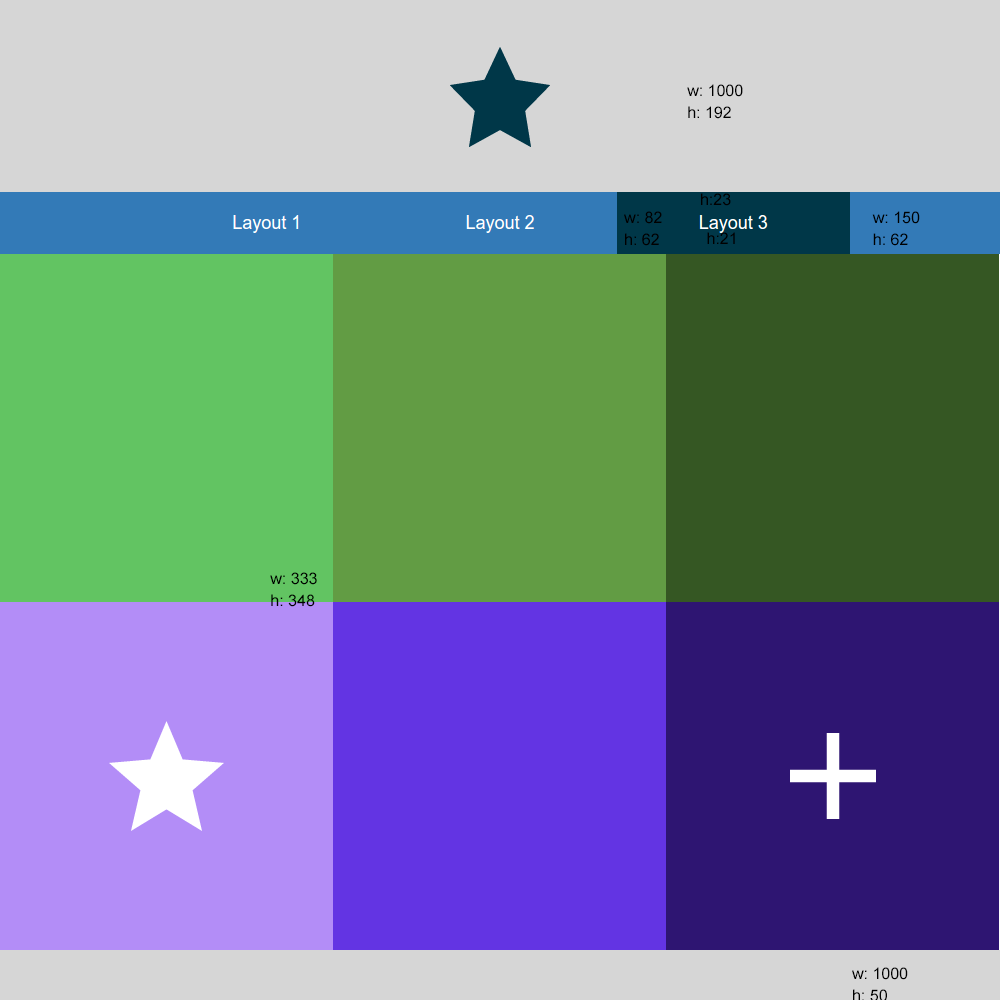
<style>
.page{position:relative;width:1000px;height:1000px;background:#d6d6d6}
.page>*{position:absolute;margin:0}
.t1{font:16px/22px "ArialMT";color:#000000}
.t2{font:16px "ArialMT";color:#000000}
</style>
<div class="page">
<p class="t1" style="left:687px;top:84px;width:56px;height:35px">w: 1000<br>h: 192</p>
<p class="t2" style="left:701px;top:193px;width:30px;height:13px">h:23</p>
<p class="t1" style="left:624px;top:211px;width:38px;height:35px">w: 82<br>h: 62</p>
<p class="t1" style="left:872px;top:211px;width:48px;height:35px">w: 150<br>h: 62</p>
<p class="t2" style="left:707px;top:232px;width:28px;height:12px">h:21</p>
<p class="t1" style="left:270px;top:572px;width:47px;height:35px">w: 333<br>h: 348</p>
<p class="t1" style="left:852px;top:967px;width:56px;height:35px">w: 1000<br>h: 50</p>
</div>
